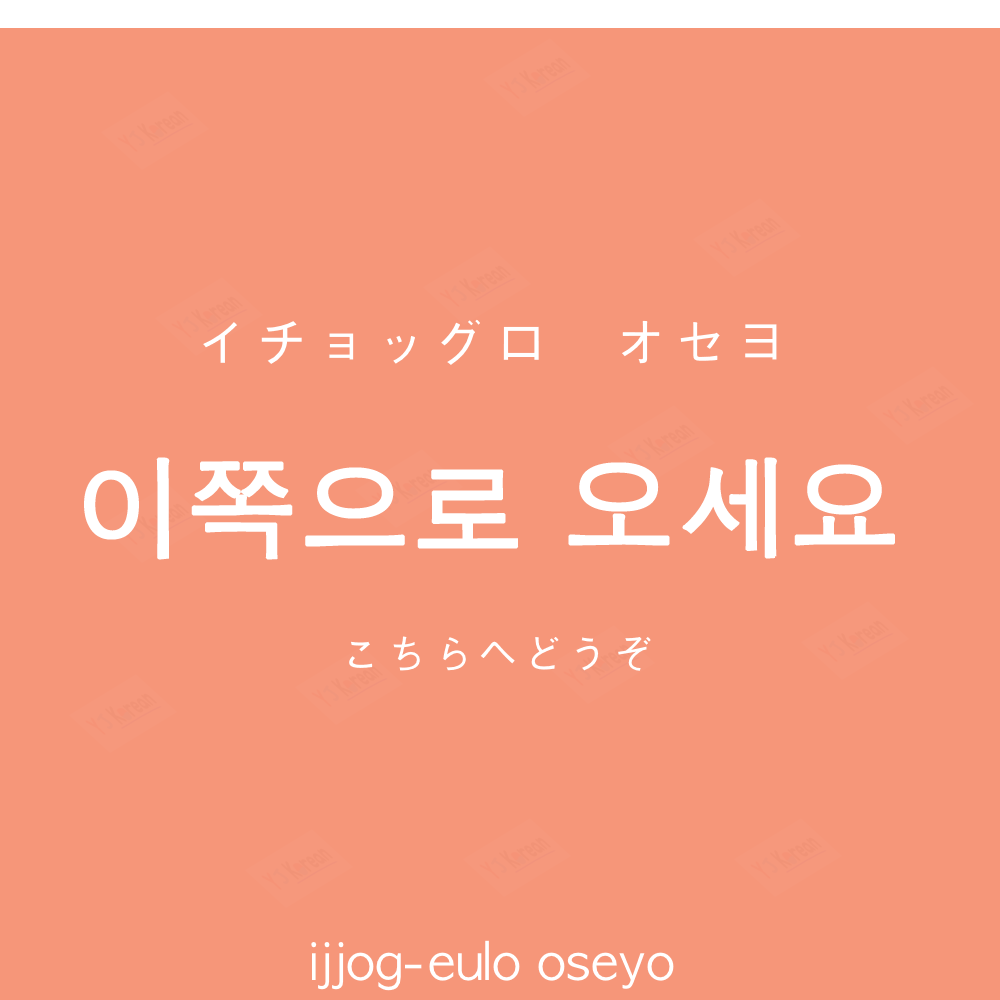
<style>
.page{position:relative;width:1000px;height:1000px;background:#f69679}
.page>*{position:absolute;margin:0}
.t1{font:60px "AppleGothic";color:#ffffff}
.t2{font:110px "AppleGothic";color:#ffffff;font-weight:bold}
.t3{font:45px "AppleGothic";color:#ffffff}
.t4{font:50px "AppleGothic";color:#ffffff}
</style>
<div class="page">
<p class="t1" style="left:203px;top:319px;width:574px;height:46px">イチョッグロ　オセヨ</p>
<p class="t2" style="left:84px;top:457px;width:811px;height:103px">이쪽으로 오세요</p>
<p class="t3" style="left:349px;top:636px;width:302px;height:35px">こちらへどうぞ</p>
<p class="t4" style="left:311px;top:940px;width:363px;height:51px">ijjog-eulo oseyo</p>
</div>
